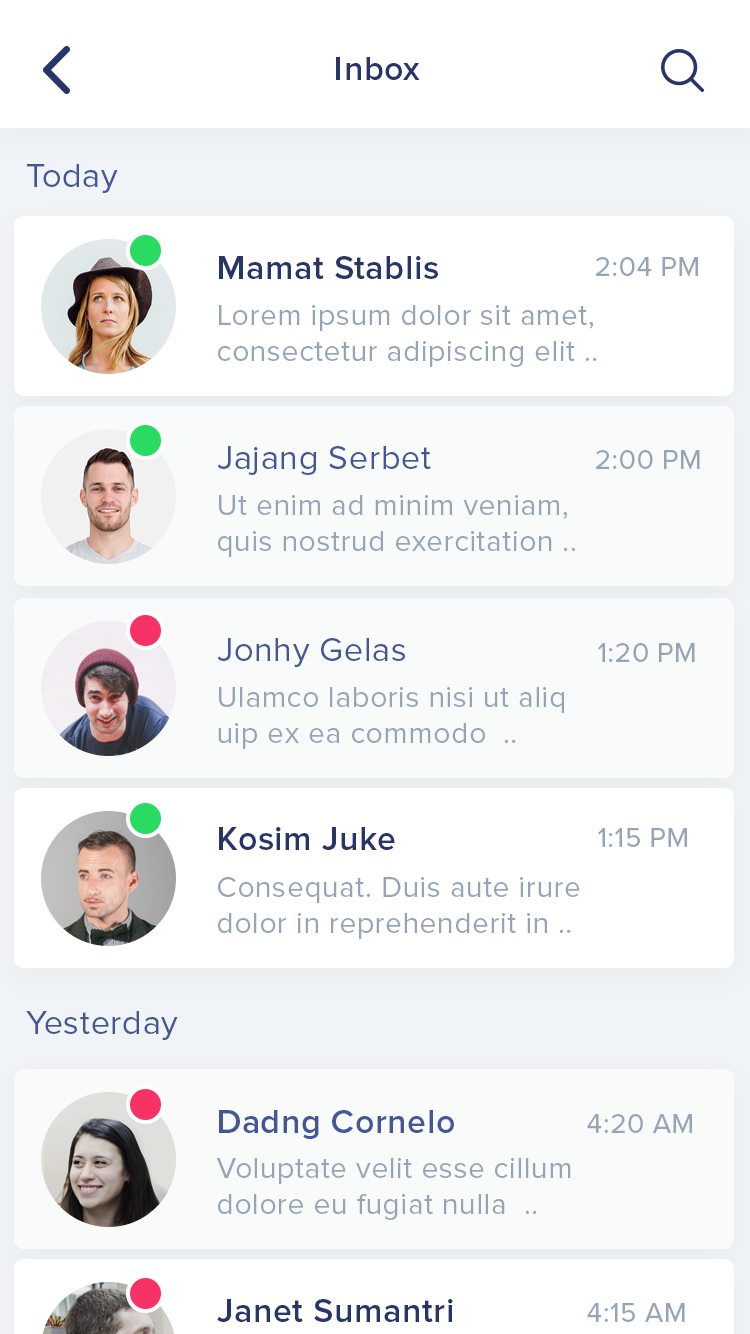
<style>
.page{position:relative;width:750px;height:1334px;background:#ffffff}
.page>*{position:absolute;margin:0}
.t1{font:34px "ProximaNova-Semibold";letter-spacing:0.02em;color:#263668}
.t2{font:34px "ProximaNova-Regular";letter-spacing:0.02em;color:#435798}
.t3{font:28px "ProximaNova-Regular";letter-spacing:0.02em;color:#96a4ba}
.t4{font:30px "ProximaNova-Regular";letter-spacing:0.02em;color:#96a4ba}
.t5{font:34px "ProximaNova-Semibold";letter-spacing:0.02em;color:#435798}
</style>
<div class="page">
<p class="t1" style="left:336px;top:57px;width:84px;height:23px">Inbox</p>
<p class="t2" style="left:27px;top:164px;width:91px;height:29px">Today</p>
<p class="t1" style="left:219px;top:256px;width:219px;height:23px">Mamat Stablis</p>
<p class="t3" style="left:596px;top:257px;width:102px;height:19px">2:04 PM</p>
<p class="t4" style="left:218px;top:305px;width:379px;height:62px">Lorem ipsum dolor sit amet, <br>consectetur adipiscing elit ..</p>
<p class="t2" style="left:217px;top:446px;width:214px;height:29px">Jajang Serbet</p>
<p class="t3" style="left:596px;top:450px;width:104px;height:19px">2:00 PM</p>
<p class="t4" style="left:218px;top:495px;width:357px;height:62px">Ut enim ad minim veniam,<br>quis nostrud exercitation ..</p>
<p class="t2" style="left:217px;top:638px;width:188px;height:29px">Jonhy Gelas</p>
<p class="t3" style="left:598px;top:643px;width:97px;height:19px">1:20 PM</p>
<p class="t4" style="left:218px;top:687px;width:346px;height:62px">Ulamco laboris nisi ut aliq<br>uip ex ea commodo  ..</p>
<p class="t1" style="left:219px;top:827px;width:176px;height:23px">Kosim Juke</p>
<p class="t3" style="left:598px;top:828px;width:89px;height:19px">1:15 PM</p>
<p class="t4" style="left:218px;top:877px;width:362px;height:62px">Consequat. Duis aute irure <br>dolor in reprehenderit in ..</p>
<p class="t2" style="left:26px;top:1011px;width:152px;height:29px">Yesterday</p>
<p class="t5" style="left:219px;top:1110px;width:235px;height:29px">Dadng Cornelo</p>
<p class="t3" style="left:587px;top:1114px;width:105px;height:19px">4:20 AM</p>
<p class="t4" style="left:216px;top:1158px;width:355px;height:62px">Voluptate velit esse cillum<br>dolore eu fugiat nulla  ..</p>
<p class="t1" style="left:217px;top:1299px;width:236px;height:23px">Janet Sumantri</p>
<p class="t3" style="left:587px;top:1303px;width:98px;height:19px">4:15 AM</p>
</div>
